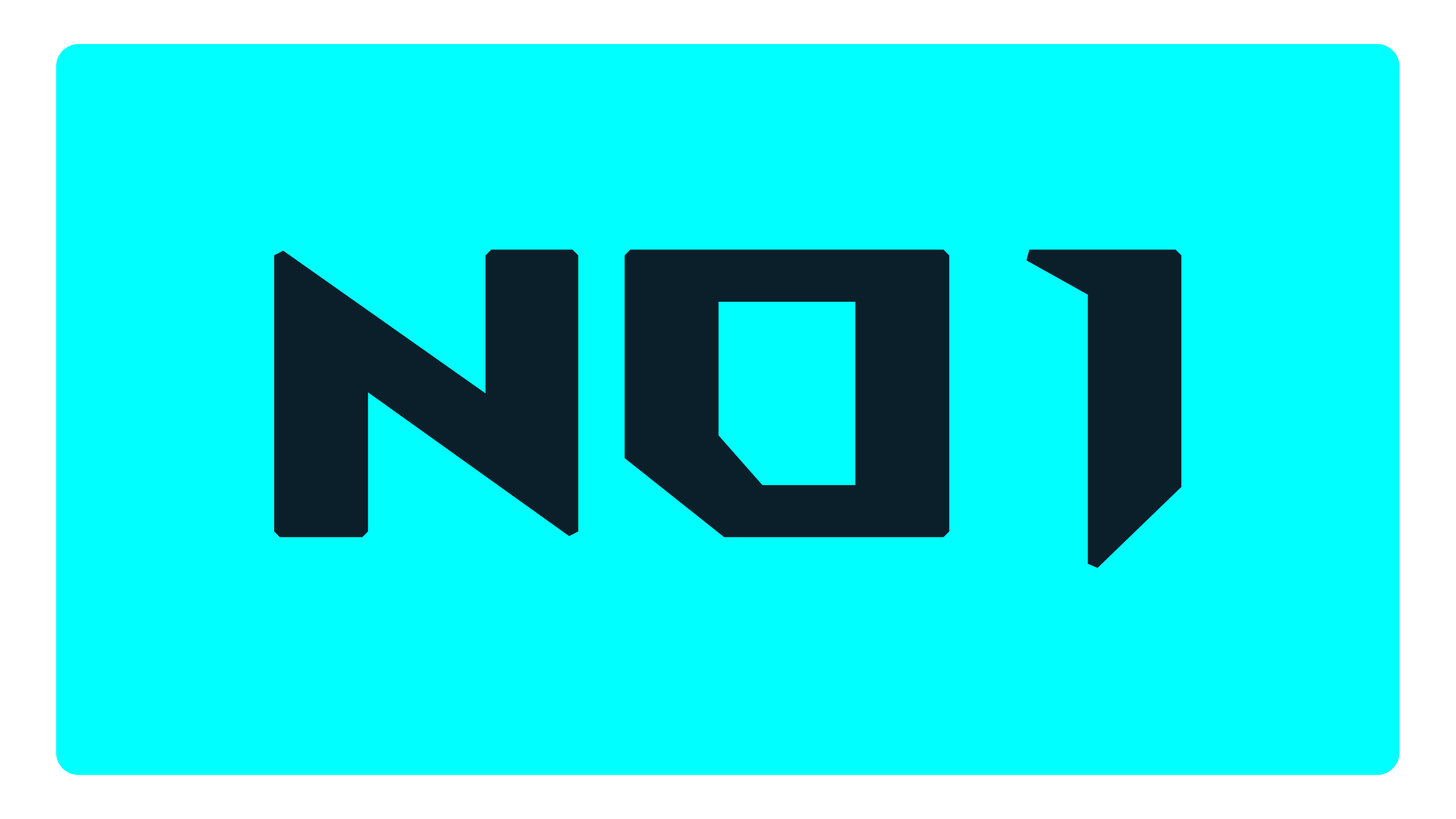
<style>
.page{position:relative;width:1456px;height:819px;background:#00ffff}
.page>*{position:absolute;margin:0}
.t1{font:394.4px "AniMeMatrix-MB_EN";color:#0b1f2a;font-weight:bold}
</style>
<div class="page">
<p class="t1" style="left:274px;top:250px;width:908px;height:318px">No1</p>
</div>
